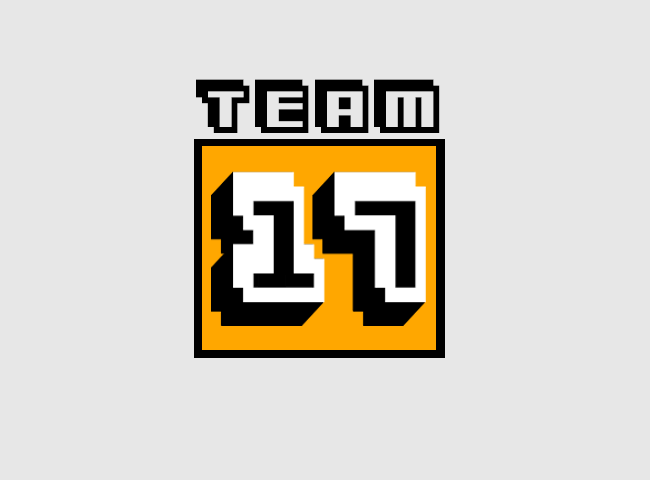
<style>
.page{position:relative;width:650px;height:480px;background:#e7e7e7}
.page>*{position:absolute;margin:0}
.t1{font:95px "3Dventure";color:#000000}
</style>
<div class="page">
<p class="t1" style="left:196px;top:79px;width:244px;height:54px">Team</p>
</div>
